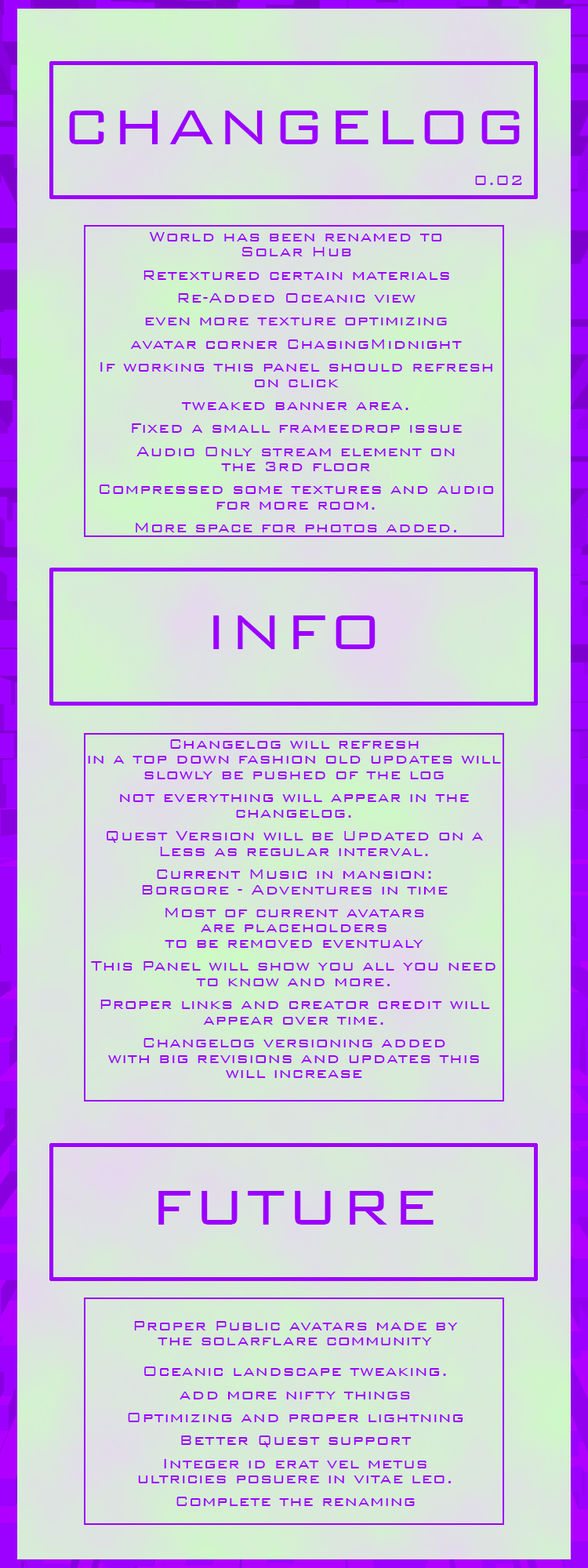
<style>
.page{position:relative;width:588px;height:1568px}
.page>*{position:absolute;margin:0}
.t1{font:65.1px "BankGothicBT-Light";letter-spacing:0.02em;color:#9c00ff}
.t2{font:18.8px "BankGothicBT-Light";letter-spacing:0.02em;color:#9c00ff}
.t3{font:18.8px/7.7px "BankGothicBT-Light";letter-spacing:0.02em;color:#9c00ff}
</style>
<div class="page">
<p class="t1" style="left:69px;top:111px;width:451px;height:33px">CHANGELOG</p>
<p class="t2" style="left:475px;top:176px;width:47px;height:9px">0.02</p>
<p class="t3" style="left:100px;top:232px;width:394px;height:300px;text-align:center">World has been renamed to <br><br>Solar Hub<br><br><br>Retextured certain materials<br><br><br>Re-Added Oceanic view<br><br><br>even more texture optimizing<br><br><br>avatar corner ChasingMidnight<br><br><br>If working this panel should refresh <br><br>on click<br><br><br>tweaked banner area.<br><br><br>Fixed a small frameedrop issue<br><br><br>Audio Only stream element on <br><br>the 3rd floor<br><br><br>Compressed some textures and audio<br><br>for more room.<br><br><br>More space for photos added.<br><br><br>GUI menus updated with additional<br><br>options.<br><br><br>Star twinkles added.<br><br><br>ChasingMidnights Sun added.<br> <br><br>Initial round of color picking <br><br>and accenting done.<br><br><br>Colliders adjusted for easier access<br><br><br>Added Teleport station to all big <br><br>floors.<br><br><br>Re-Fixed not being able use <br><br>(menu)button on 3rd avatar floor.<br><br><br>Frequent used doors <br><br>do have soundfx now<br><br><br><br><br>Playing around with the idea of <br><br>Virtual Weekality intergration.<br><br><br>3rd Avatar floor mirror has<br><br>Realtime Light Support<br><br>Use settings panel to adjust.</p>
<p class="t1" style="left:213px;top:615px;width:163px;height:34px">INFO</p>
<p class="t3" style="left:88px;top:739px;width:413px;height:339px;text-align:center">Changelog will refresh <br><br>in a top down fashion old updates will <br><br>slowly be pushed of the log<br> <br><br>not everything will appear in the <br><br>changelog.<br><br><br>Quest Version will be Updated on a<br><br>Less as regular interval.<br><br><br>Current Music in mansion:<br><br>Borgore - Adventures in time<br><br><br>Most of current avatars <br><br>are placeholders <br><br>to be removed eventualy<br><br><br>This Panel will show you all you need <br><br>to know and more.<br><br><br>Proper links and creator credit will <br><br>appear over time.<br><br><br>Changelog versioning added <br><br>with big revisions and updates this <br><br>will increase</p>
<p class="t1" style="left:158px;top:1191px;width:276px;height:34px">FUTURE</p>
<p class="t3" style="left:128px;top:1321px;width:335px;height:185px;text-align:center">Proper Public avatars made by<br><br>the solarflare community<br><br><br><br>Oceanic landscape tweaking. <br><br><br>add more nifty things<br><br><br>Optimizing and proper lightning<br><br><br>Better Quest support<br><br><br>Integer id erat vel metus <br><br>ultricies posuere in vitae leo.<br><br><br>Complete the renaming</p>
</div>
